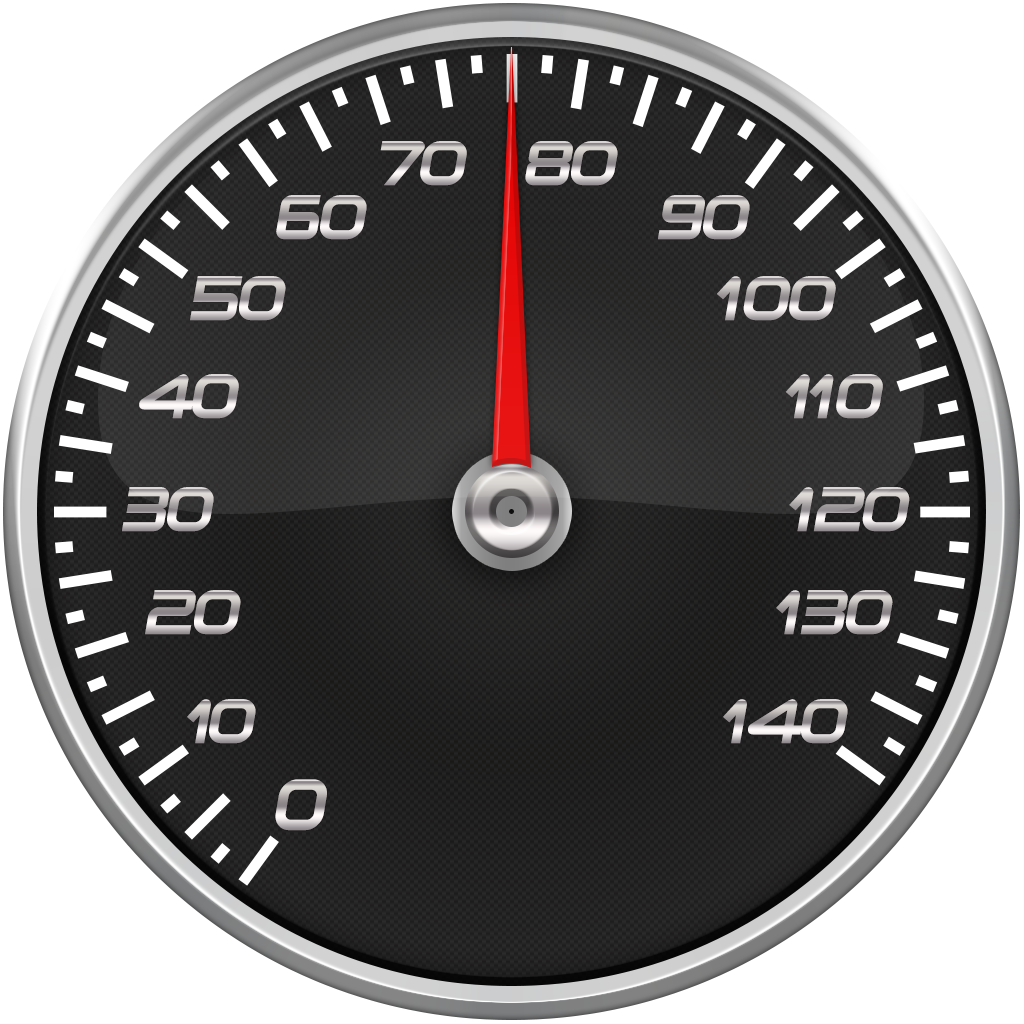
<style>
.page{position:relative;width:1024px;height:1024px;background:#ffffff}
.page>*{position:absolute;margin:0}
.t1{font:60.2px "Planetium-XBoldDemo";letter-spacing:-0.08em;font-style:italic}
.t2{font:60.2px "Planetium-XBoldDemo";letter-spacing:-0.16em;font-style:italic}
.t3{font:69.6px "Planetium-XBoldDemo";letter-spacing:-0.16em;font-style:italic;scale:0.96 1}
</style>
<div class="page">
<p class="t1" style="left:380px;top:141px;width:87px;height:45px">70</p>
<p class="t1" style="left:525px;top:141px;width:93px;height:45px">80</p>
<p class="t1" style="left:276px;top:195px;width:91px;height:45px">60</p>
<p class="t1" style="left:658px;top:195px;width:92px;height:45px">90</p>
<p class="t1" style="left:190px;top:276px;width:96px;height:45px">50</p>
<p class="t1" style="left:717px;top:276px;width:119px;height:45px">100</p>
<p class="t1" style="left:139px;top:374px;width:100px;height:45px">40</p>
<p class="t1" style="left:785px;top:374px;width:98px;height:45px">110</p>
<p class="t1" style="left:122px;top:487px;width:92px;height:45px">30</p>
<p class="t1" style="left:789px;top:487px;width:121px;height:45px">120</p>
<p class="t1" style="left:145px;top:590px;width:96px;height:45px">20</p>
<p class="t1" style="left:776px;top:590px;width:117px;height:45px">130</p>
<p class="t2" style="left:187px;top:699px;width:69px;height:45px">10</p>
<p class="t1" style="left:723px;top:699px;width:125px;height:45px">140</p>
<p class="t3" style="left:275px;top:779px;width:52px;height:52px">0</p>
</div>
